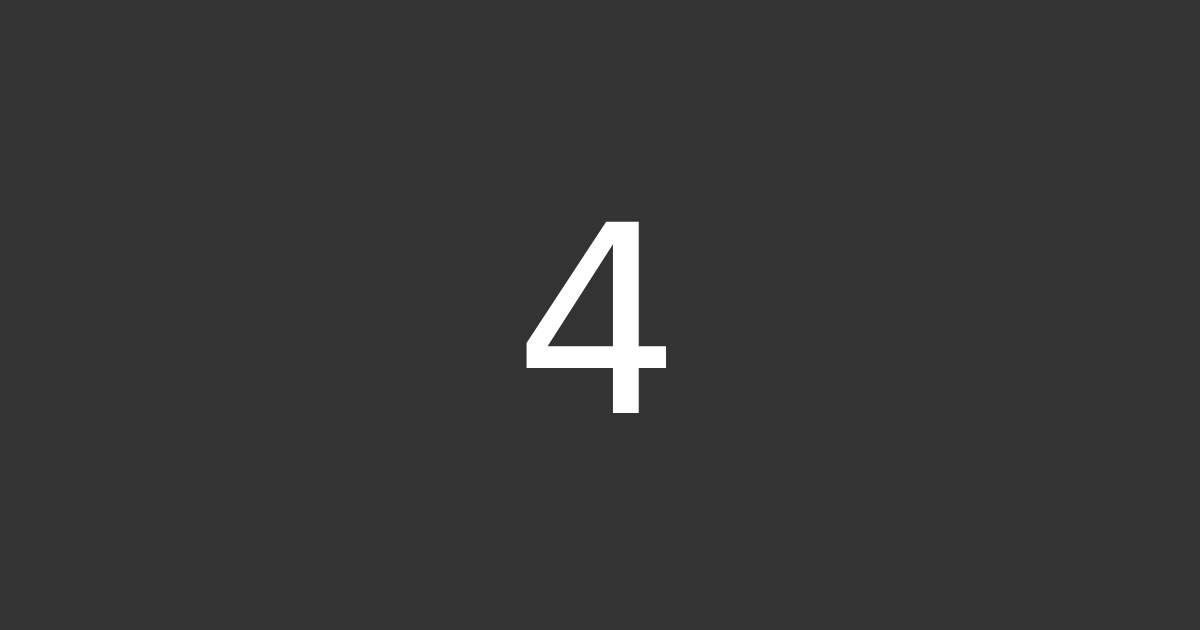
<style>
.page{position:relative;width:1200px;height:630px;background:#333333}
.page>*{position:absolute;margin:0}
.t1{font:262.5px "DejaVuSans";color:#ffffff}
</style>
<div class="page">
<p class="t1" style="left:526px;top:221px;width:141px;height:193px">4</p>
</div>
